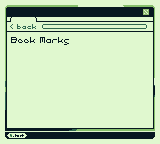
<style>
.page{position:relative;width:160px;height:144px;background:#e0f8cf}
.page>*{position:absolute;margin:0}
.t1{font:6.2px "Pixel";letter-spacing:-0.005em;color:#306850}
.t2{font:8.3px "Pixel";letter-spacing:-0.005em;color:#071821}
</style>
<div class="page">
<p class="t1" style="left:17px;top:24px;width:19px;height:5px">back</p>
<p class="t2" style="left:11px;top:37px;width:58px;height:8px">Book Marks</p>
</div>
